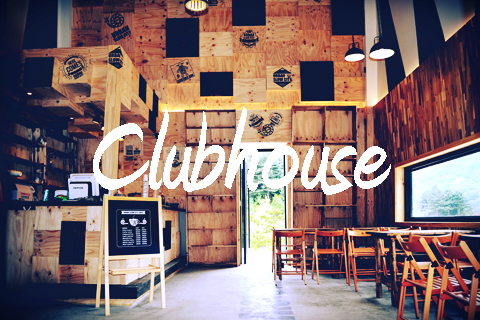
<style>
.page{position:relative;width:480px;height:320px}
.page>*{position:absolute;margin:0}
.t1{font:128px "Amienne-Bold";color:#ffffff}
</style>
<div class="page">
<p class="t1" style="left:93px;top:106px;width:298px;height:89px">Clubhouse</p>
</div>
